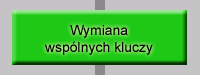
<style>
.page{position:relative;width:200px;height:75px;background:#c6c3c6}
.page>*{position:absolute;margin:0}
.t1{font:14px "ArialMT";color:#000000}
</style>
<div class="page">
<p class="t1" style="left:45px;top:25px;width:108px;height:30px;text-align:center">Wymiana<br>wspólnych kluczy</p>
</div>
